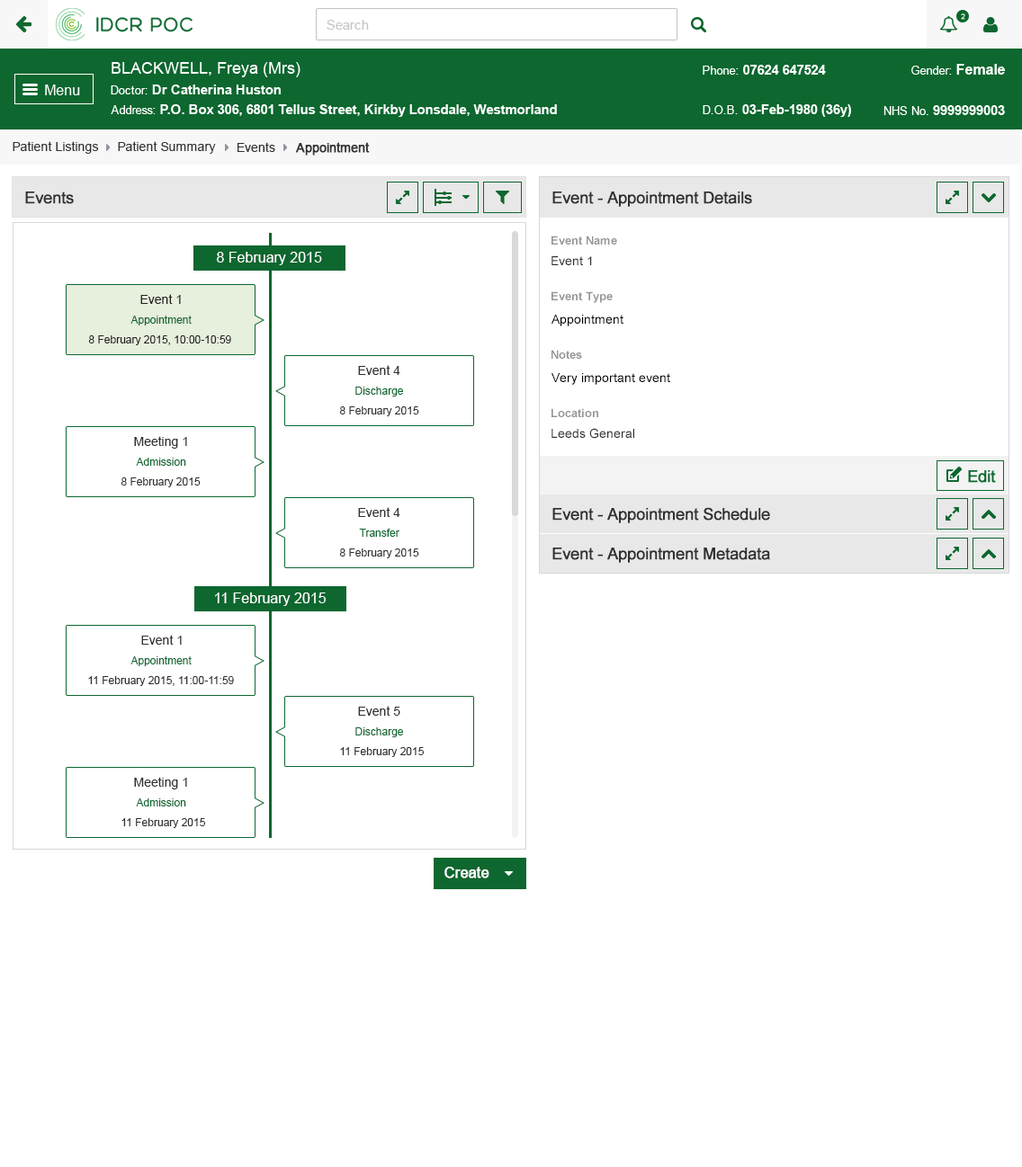
<style>
.page{position:relative;width:1022px;height:1167px;background:#ffffff}
.page>*{position:absolute;margin:0}
.t1{font:12.6px "ArialMT";color:#313131}
.t2{font:12.6px "ArialMT";color:#313131;font-weight:bold}
.t3{font:16.2px "ArialMT";color:#303030;font-weight:bold}
.t4{font:11.7px "Arial-BoldMT";color:#959595}
.t5{font:14.4px "ArialMT";color:#ffffff}
.t6{font:12.6px "ArialMT";color:#303030}
.t7{font:12.6px "ArialMT";color:#242424}
.t8{font:10.8px "ArialMT";color:#0d672f}
.t9{font:12.6px "ArialMT";color:#000000}
.t10{font:10.8px "ArialMT";color:#242424}
.t11{font:10.8px "ArialMT";color:#303030}
.t12{font:14.4px "ArialMT";color:#ffffff;font-weight:bold}
</style>
<div class="page">
<p class="t1" style="left:13px;top:141px;width:86px;height:13px">Patient Listings</p>
<p class="t1" style="left:118px;top:141px;width:98px;height:13px">Patient Summary</p>
<p class="t1" style="left:237px;top:142px;width:38px;height:10px">Events</p>
<p class="t2" style="left:296px;top:142px;width:74px;height:14px">Appointment</p>
<p class="t3" style="left:25px;top:192px;width:49px;height:12px">Events</p>
<p class="t3" style="left:552px;top:192px;width:200px;height:15px">Event - Appointment Details</p>
<p class="t4" style="left:551px;top:236px;width:66px;height:9px">Event Name</p>
<p class="t5" style="left:217px;top:252px;width:105px;height:13px">8 February 2015</p>
<p class="t6" style="left:551px;top:256px;width:41px;height:9px">Event 1</p>
<p class="t4" style="left:551px;top:291px;width:61px;height:12px">Event Type</p>
<p class="t7" style="left:140px;top:294px;width:41px;height:10px">Event 1</p>
<p class="t8" style="left:130px;top:316px;width:62px;height:10px">Appointment</p>
<p class="t9" style="left:551px;top:315px;width:72px;height:11px">Appointment</p>
<p class="t10" style="left:88px;top:335px;width:143px;height:10px">8 February 2015, 10:00-10:59</p>
<p class="t4" style="left:551px;top:350px;width:31px;height:9px">Notes</p>
<p class="t6" style="left:358px;top:365px;width:42px;height:10px">Event 4</p>
<p class="t9" style="left:551px;top:373px;width:119px;height:12px">Very important event</p>
<p class="t8" style="left:355px;top:387px;width:48px;height:10px">Discharge</p>
<p class="t11" style="left:339px;top:406px;width:80px;height:10px">8 February 2015</p>
<p class="t4" style="left:551px;top:408px;width:47px;height:9px">Location</p>
<p class="t6" style="left:134px;top:436px;width:53px;height:13px">Meeting 1</p>
<p class="t6" style="left:551px;top:428px;width:83px;height:11px">Leeds General</p>
<p class="t8" style="left:136px;top:458px;width:50px;height:8px">Admission</p>
<p class="t11" style="left:121px;top:478px;width:80px;height:9px">8 February 2015</p>
<p class="t6" style="left:358px;top:507px;width:42px;height:10px">Event 4</p>
<p class="t3" style="left:552px;top:507px;width:218px;height:16px">Event - Appointment Schedule</p>
<p class="t8" style="left:359px;top:529px;width:40px;height:8px">Transfer</p>
<p class="t11" style="left:339px;top:549px;width:80px;height:9px">8 February 2015</p>
<p class="t3" style="left:552px;top:548px;width:218px;height:15px">Event - Appointment Metadata</p>
<p class="t5" style="left:215px;top:593px;width:111px;height:13px">11 February 2015</p>
<p class="t6" style="left:141px;top:635px;width:41px;height:10px">Event 1</p>
<p class="t8" style="left:130px;top:656px;width:62px;height:10px">Appointment</p>
<p class="t11" style="left:88px;top:676px;width:146px;height:10px">11 February 2015, 11:00-11:59</p>
<p class="t6" style="left:358px;top:706px;width:42px;height:10px">Event 5</p>
<p class="t8" style="left:355px;top:728px;width:48px;height:9px">Discharge</p>
<p class="t11" style="left:340px;top:747px;width:84px;height:10px">11 February 2015</p>
<p class="t6" style="left:134px;top:777px;width:53px;height:13px">Meeting 1</p>
<p class="t8" style="left:136px;top:799px;width:50px;height:8px">Admission</p>
<p class="t11" style="left:121px;top:818px;width:84px;height:10px">11 February 2015</p>
<p class="t12" style="left:444px;top:867px;width:45px;height:12px">Create</p>
</div>
